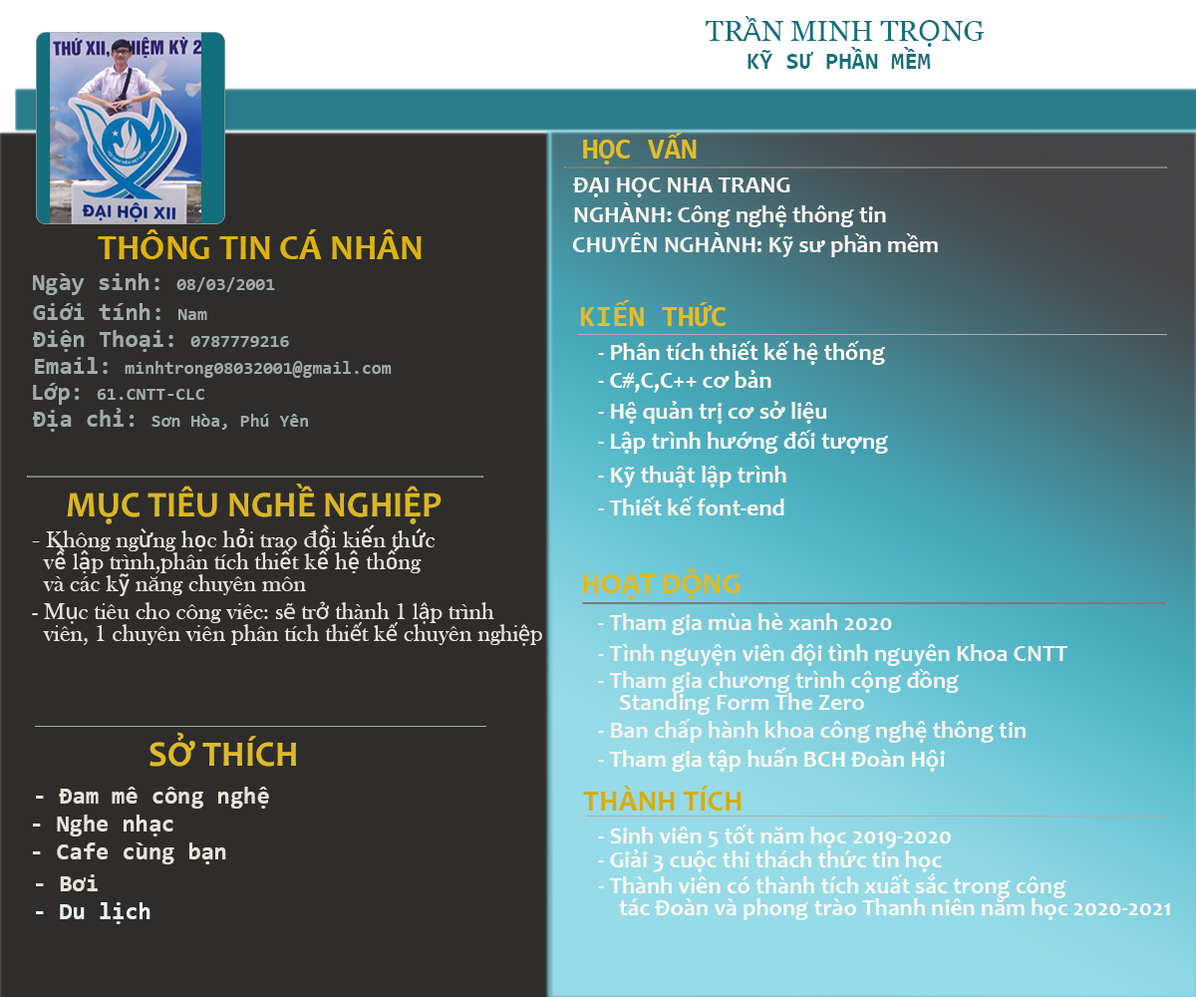
<style>
.page{position:relative;width:1196px;height:997px;background:#2e2d2b}
.page>*{position:absolute;margin:0}
.t1{font:27.8px "Georgia";color:#146f7c;scale:1.03 1}
.t2{font:27.8px "Candara";color:#146f7c;scale:1.03 1}
.t3{font:31.9px "Candara";color:#146f7c;scale:1.03 1}
.t4{font:23.9px "Consolas-Bold";color:#146f7c}
.t5{font:29.9px "Consolas-Bold";color:#e3bd25}
.t6{font:23.9px "Candara-Bold";color:#f8f7f4}
.t7{font:35.9px "Candara-Bold";color:#ddb30c}
.t8{font:23.9px "Consolas-Bold";color:#a2abab}
.t9{font:17.9px "Consolas-Bold";color:#a2abab}
.t10{font:23.9px "Candara-Bold";color:#fcfaf3}
.t11{font:36.3px "Candara-Bold";color:#dbb623}
.t12{font:23.9px/21.9px "BaskOldFace";color:#e6e4db}
.t13{font:23.9px/21.9px "BookAntiqua";color:#e6e4db}
.t14{font:23.9px/21.9px "Bahnschrift";color:#e6e4db}
.t15{font:29.9px "Candara-Bold";color:#e2b915}
.t16{font:23.9px/21.9px "MyriadPro-Regular";color:#e6e4db}
.t17{font:23.9px "Candara-Bold";color:#f5f4f1}
.t18{font:23.9px/21.9px "Candara-Bold";color:#f5f4f1}
.t19{font:36.2px "Candara-Bold";color:#deba2b}
.t20{font:23.9px "Candara-Bold";color:#fdfbf3}
.t21{font:29.9px "Candara-Bold";color:#d5ad0d}
.t22{font:23.9px "Consolas-Bold";color:#e6e4db}
.t23{font:23.9px "Candara-Bold";color:#faf9f4}
.t24{font:23.9px/21.9px "Candara-Bold";color:#faf9f4}
.t25{font:23.9px "Consolas-Bold";color:#eff5f6}
</style>
<div class="page">
<p class="t1" style="left:706px;top:16px;width:279px;height:31px">TR<span class="t2">Ầ</span>N MINH TR<span class="t3">Ọ</span>NG</p>
<p class="t4" style="left:748px;top:47px;width:183px;height:22px">KỸ SƯ PHẦN MỀM</p>
<p class="t5" style="left:583px;top:133px;width:114px;height:31px">HỌC VẤN</p>
<p class="t6" style="left:573px;top:177px;width:217px;height:20px">ĐẠI HỌC NHA TRANG</p>
<p class="t6" style="left:574px;top:202px;width:312px;height:25px">NGHÀNH: Công nghệ thông tin</p>
<p class="t7" style="left:98px;top:229px;width:324px;height:30px">THÔNG TIN CÁ NHÂN</p>
<p class="t6" style="left:572px;top:232px;width:366px;height:25px">CHUYÊN NGHÀNH: Kỹ sư phần mềm</p>
<p class="t8" style="left:33px;top:273px;width:242px;height:22px">Ngày sinh: <span class="t9">08/03/2001</span></p>
<p class="t8" style="left:33px;top:303px;width:174px;height:17px">Giới tính: <span class="t9">Nam</span></p>
<p class="t5" style="left:580px;top:300px;width:146px;height:26px">KIẾN THỨC</p>
<p class="t8" style="left:33px;top:330px;width:256px;height:22px">Điện Thoại: <span class="t9">0787779216</span></p>
<p class="t10" style="left:598px;top:341px;width:287px;height:24px">- Phân tích thiết kế hệ thống</p>
<p class="t9" style="left:35px;top:357px;width:357px;height:21px"><span class="t8">Email: </span>minhtrong08032001@gmail.com</p>
<p class="t10" style="left:598px;top:370px;width:174px;height:23px">- C#,C,C++ cơ bản</p>
<p class="t9" style="left:33px;top:383px;width:171px;height:22px"><span class="t8">Lớp: </span>61.CNTT-CLC</p>
<p class="t10" style="left:598px;top:401px;width:229px;height:23px">- Hệ quản trị cơ sở liệu</p>
<p class="t9" style="left:33px;top:408px;width:275px;height:24px"><span class="t8">Địa chỉ: </span>Sơn Hòa, Phú Yên</p>
<p class="t10" style="left:598px;top:430px;width:290px;height:24px">- Lập trình hướng đối tượng</p>
<p class="t10" style="left:598px;top:466px;width:189px;height:21px">- Kỹ thuật lập trình</p>
<p class="t11" style="left:67px;top:483px;width:375px;height:41px">MỤC TIÊU NGHỀ NGHIỆP</p>
<p class="t10" style="left:598px;top:496px;width:187px;height:19px">- Thiết kế font-end</p>
<p class="t12" style="left:32px;top:524px;width:403px;height:72px"><span class="t13">-</span> Không ng<span class="t14">ừ</span>ng h<span class="t14">ọ</span>c h<span class="t14">ỏ</span>i trao <span class="t13">đ</span><span class="t14">ồ</span>i ki<span class="t14">ế</span>n th<span class="t14">ứ</span>c<br>  v<span class="t14">ề</span> l<span class="t14">ậ</span>p trình,phân tích thi<span class="t14">ế</span>t k<span class="t14">ế</span> h<span class="t14">ệ</span> th<span class="t14">ố</span>ng <br>  và các k<span class="t14">ỹ</span> n<span class="t13">ă</span>ng chuyên môn</p>
<p class="t15" style="left:583px;top:568px;width:157px;height:32px">HOẠT ĐỘNG</p>
<p class="t12" style="left:32px;top:601px;width:510px;height:45px">- M<span class="t16">ụ</span>c tiêu cho công viêc: s<span class="t16">ẽ</span> tr<span class="t16">ở</span> thành 1 l<span class="t16">ậ</span>p trình <br>  viên, 1 chuyên viên phân tích thi<span class="t16">ế</span>t k<span class="t16">ế</span> chuyên nghi<span class="t16">ệ</span>p</p>
<p class="t17" style="left:598px;top:613px;width:294px;height:22px">- Tham gia mùa hè xanh 2020</p>
<p class="t17" style="left:598px;top:644px;width:470px;height:22px">- Tình nguyện viên đội tình nguyên Khoa CNTT</p>
<p class="t18" style="left:598px;top:669px;width:361px;height:46px">- Tham gia chương trình cộng đồng <br>    Standing Form The Zero</p>
<p class="t17" style="left:598px;top:719px;width:428px;height:24px">- Ban chấp hành khoa công nghệ thông tin</p>
<p class="t19" style="left:150px;top:732px;width:146px;height:35px">SỞ THÍCH</p>
<p class="t20" style="left:598px;top:748px;width:347px;height:24px">- Tham gia tập huấn BCH Đoàn Hội</p>
<p class="t21" style="left:583px;top:786px;width:159px;height:24px">THÀNH TÍCH</p>
<p class="t22" style="left:36px;top:787px;width:233px;height:21px">- Đam mê công nghệ</p>
<p class="t22" style="left:33px;top:814px;width:140px;height:22px">- Nghe nhạc</p>
<p class="t23" style="left:598px;top:824px;width:353px;height:24px">- Sinh viên 5 tốt năm học 2019-2020</p>
<p class="t22" style="left:33px;top:842px;width:193px;height:22px">- Cafe cùng bạn</p>
<p class="t23" style="left:598px;top:849px;width:344px;height:23px">- Giải 3 cuộc thi thách thức tin học</p>
<p class="t22" style="left:36px;top:874px;width:62px;height:17px">- Bơi</p>
<p class="t24" style="left:598px;top:873px;width:572px;height:47px">- Thành viên có thành tích xuất sắc trong công<br>    tác Đoàn và phong trào Thanh niên năm học 2020-2021</p>
<p class="t25" style="left:36px;top:902px;width:115px;height:22px">- Du lịch</p>
</div>
